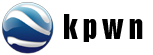
<style>
.page{position:relative;width:153px;height:55px;background:#ffffff}
.page>*{position:absolute;margin:0}
.t1{font:30.5px "HelveticaInseratLTStd-Roman";letter-spacing:0.14em;color:#000000}
</style>
<div class="page">
<p class="t1" style="left:64px;top:14px;width:79px;height:28px">kpwn</p>
</div>
